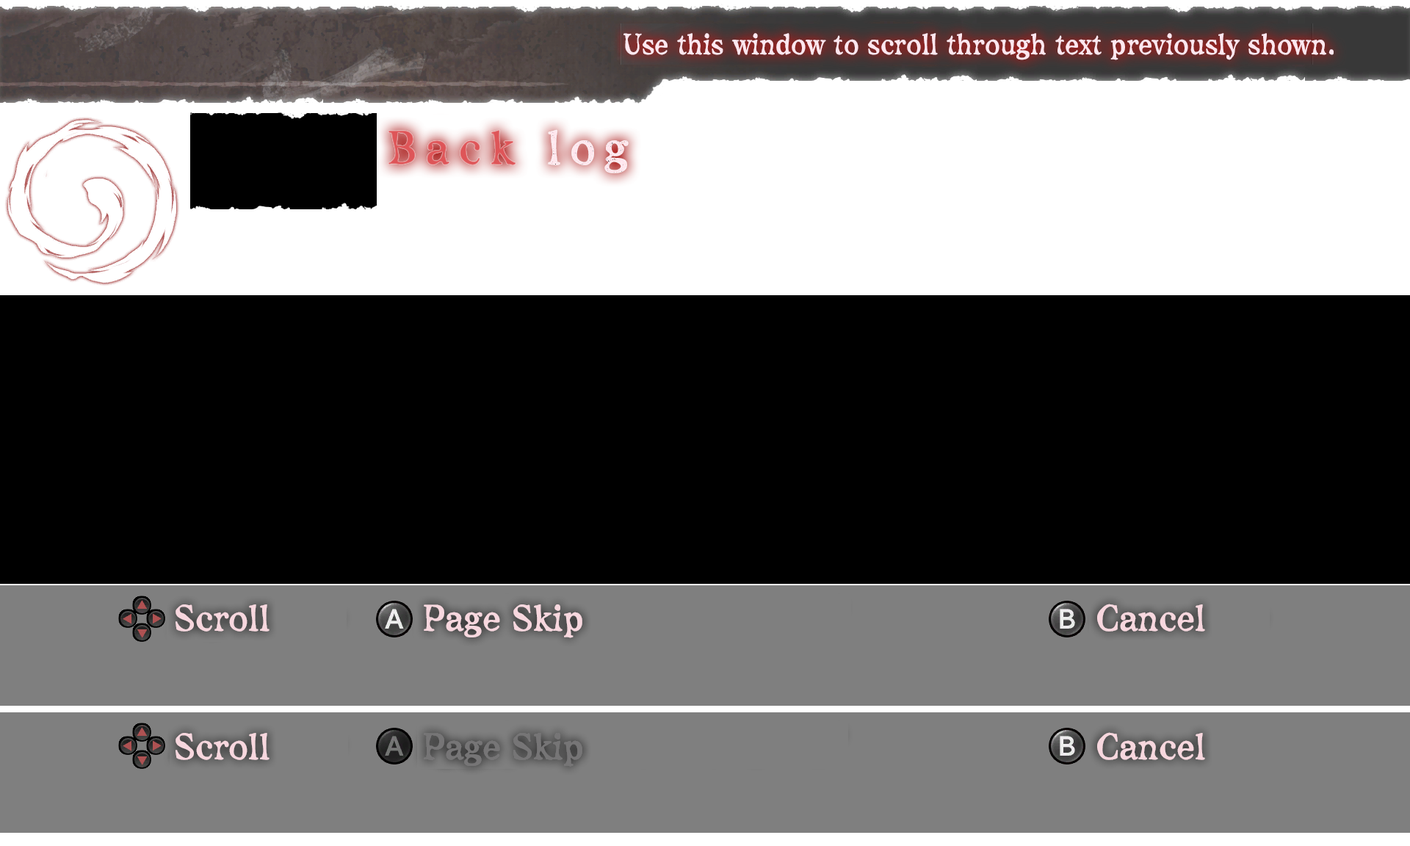
<style>
.page{position:relative;width:1410px;height:846px;background:#000000}
.page>*{position:absolute;margin:0}
.t1{font:28.6px "maidouComicMystery";color:#ffe7ef;scale:0.88 1}
.t2{font:36px "maidouComicMystery";color:#f7d7de;scale:0.91 1}
.t3{font:36px "maidouComicMystery";color:#767576;scale:0.91 1}
</style>
<div class="page">
<p class="t1" style="left:623px;top:33px;width:710px;height:27px">Use this window to scroll through text previously shown.</p>
<p class="t2" style="left:175px;top:604px;width:94px;height:27px">Scroll</p>
<p class="t2" style="left:424px;top:604px;width:158px;height:34px">Page Skip</p>
<p class="t2" style="left:1097px;top:604px;width:108px;height:27px">Cancel</p>
<p class="t2" style="left:175px;top:733px;width:94px;height:27px">Scroll</p>
<p class="t3" style="left:424px;top:733px;width:158px;height:34px">Page Skip</p>
<p class="t2" style="left:1097px;top:732px;width:108px;height:28px">Cancel</p>
</div>
